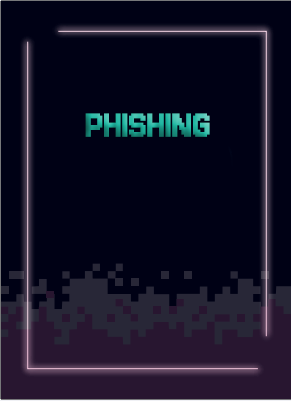
<style>
.page{position:relative;width:291px;height:401px;background:#000115}
.page>*{position:absolute;margin:0}
.t1{font:43.3px "Jersey10-Regular"}
</style>
<div class="page">
<p class="t1" style="left:85px;top:113px;width:125px;height:24px">PHISHING</p>
</div>
